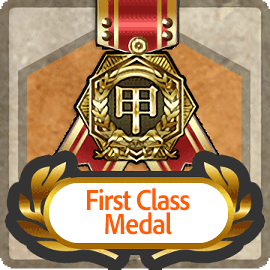
<style>
.page{position:relative;width:270px;height:270px}
.page>*{position:absolute;margin:0}
.t1{font:30px/24px "AdobeClean-Bold";letter-spacing:-0.04em;color:#ff5d00;scale:0.9 1}
</style>
<div class="page">
<p class="t1" style="left:87px;top:188px;width:103px;height:47px;text-align:center">First Class<br>Medal</p>
</div>
